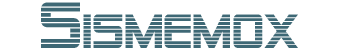
<style>
.page{position:relative;width:345px;height:49px;background:#ffffff}
.page>*{position:absolute;margin:0}
.t1{font:48px "AlienEncounters";color:#3e6875}
.t2{font:65px "AlienEncounters";color:#3e6875}
</style>
<div class="page">
<p class="t1" style="left:41px;top:2px;width:257px;height:46px"><span class="t2">S</span>ismemoX</p>
</div>
